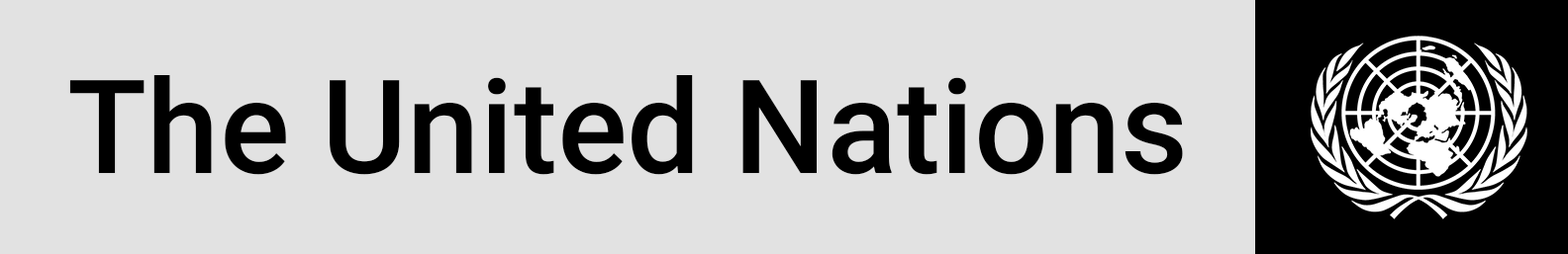
<style>
.page{position:relative;width:1568px;height:254px;background:#e2e2e2}
.page>*{position:absolute;margin:0}
.t1{font:130.7px "Roboto-Medium";color:#000000}
</style>
<div class="page">
<p class="t1" style="left:69px;top:75px;width:1114px;height:100px">The United Nations</p>
</div>
